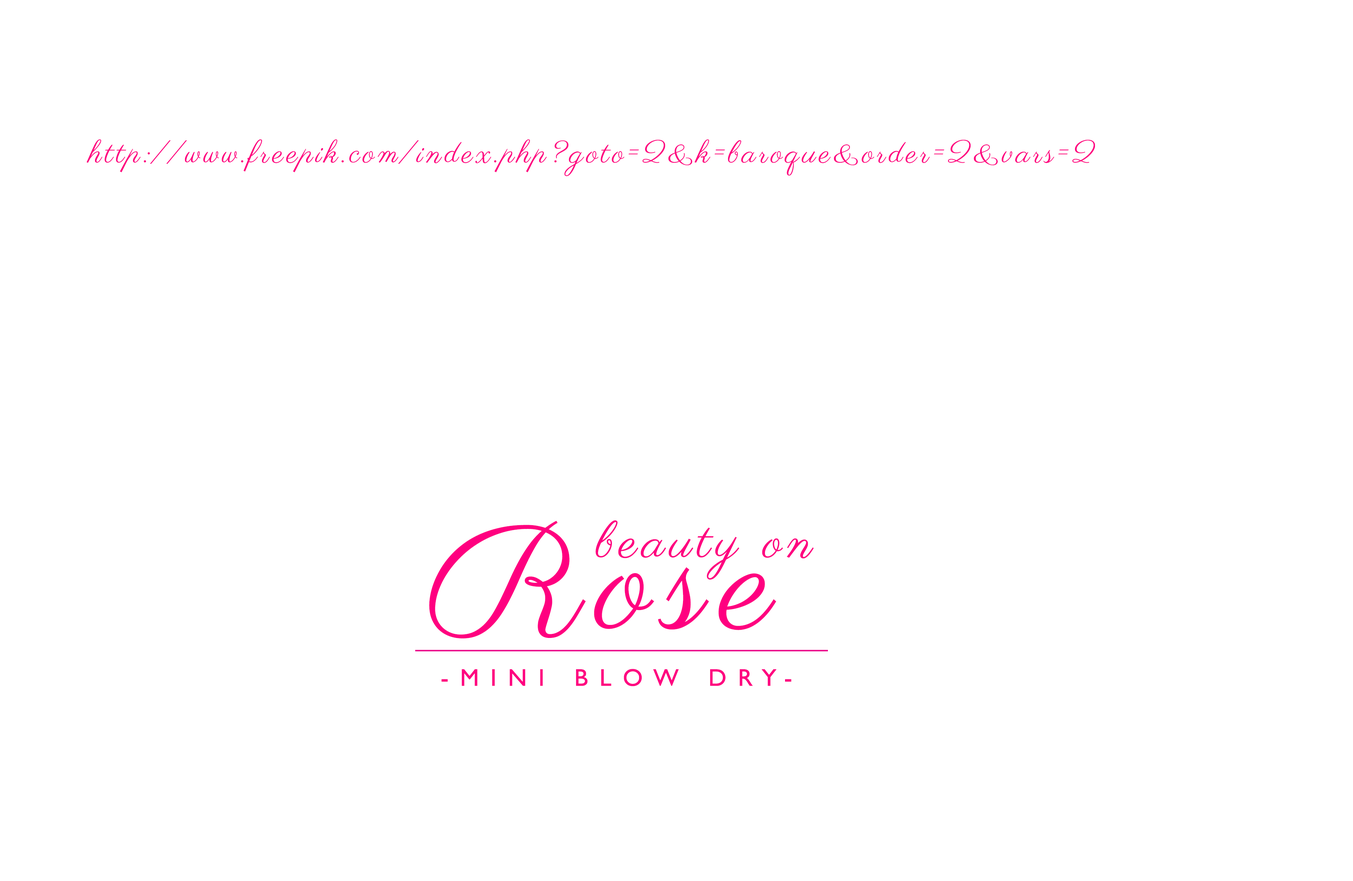
<style>
.page{position:relative;width:1353px;height:881px;background:#ffffff}
.page>*{position:absolute;margin:0}
.t1{font:31px "Parisienne-Regular";letter-spacing:0.1em;color:#ff0080}
.t2{font:147.3px "Parisienne-Regular";letter-spacing:0.1em;color:#ff0080}
.t3{font:51.1px "Parisienne-Regular";letter-spacing:0.1em;color:#ff0080}
.t4{font:24.2px "GillSans";letter-spacing:0.45em;color:#ff0080;text-transform:uppercase;font-weight:bold}
</style>
<div class="page">
<p class="t1" style="left:86px;top:139px;width:1009px;height:38px">http://www.freepik.com/index.php?goto=2&amp;k=baroque&amp;order=2&amp;vars=2</p>
<p class="t2" style="left:429px;top:521px;width:347px;height:118px">Rose</p>
<p class="t3" style="left:595px;top:521px;width:219px;height:59px">beauty on</p>
<p class="t4" style="left:441px;top:669px;width:350px;height:18px">-mini blow dry-</p>
</div>
